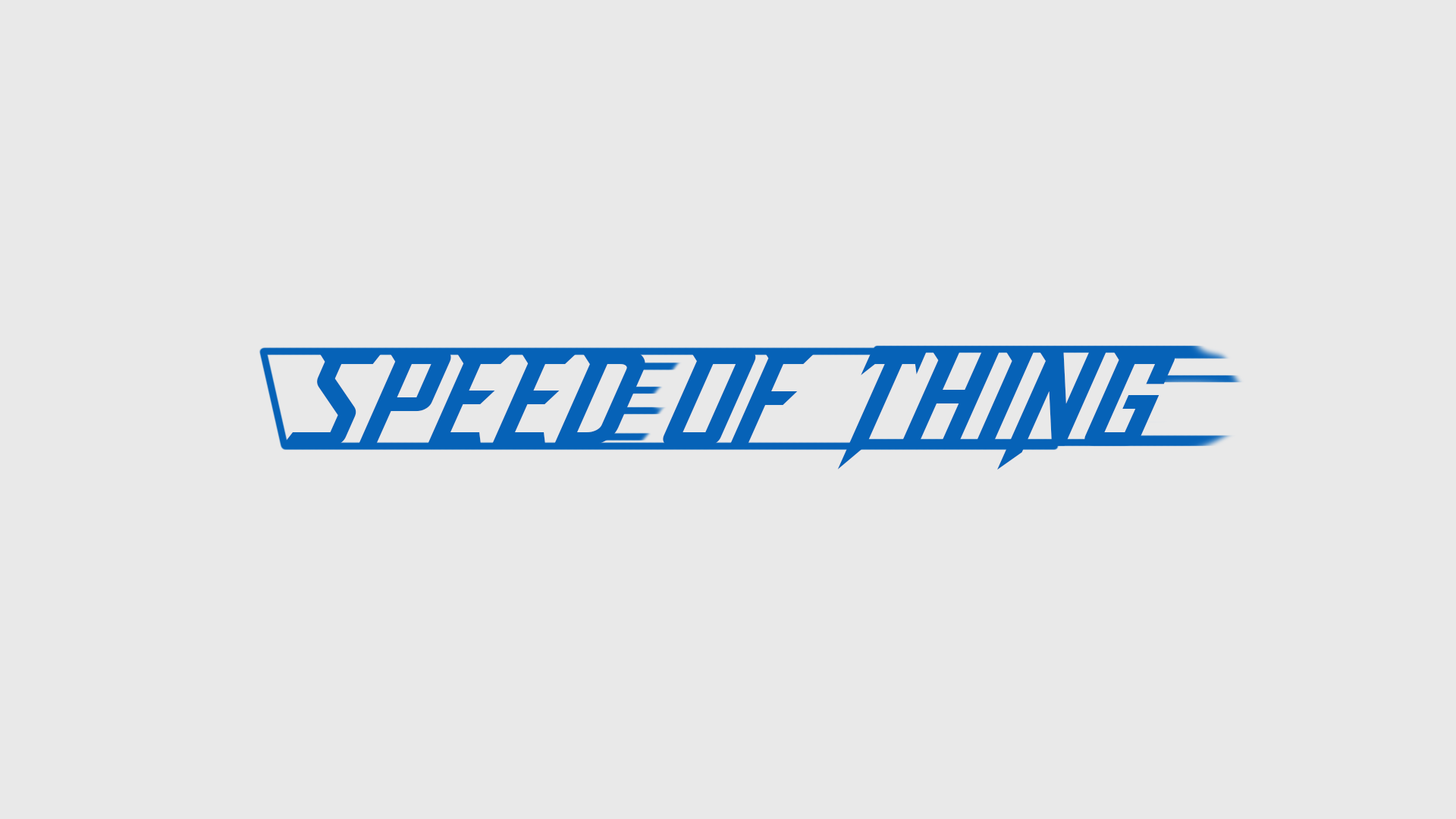
<style>
.page{position:relative;width:1456px;height:819px;background:#e9e9e9}
.page>*{position:absolute;margin:0}
.t1{font:144.5px "DashDemo";color:#0662b7;text-transform:uppercase;font-style:italic}
</style>
<div class="page">
<p class="t1" style="left:282px;top:350px;width:893px;height:120px">Speed of Thing</p>
</div>
